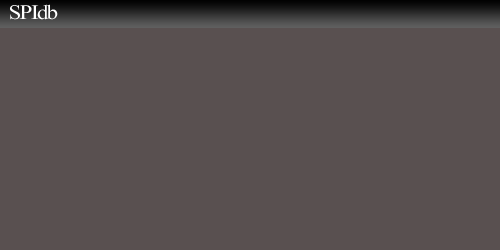
<style>
.page{position:relative;width:500px;height:250px;background:#595050}
.page>*{position:absolute;margin:0}
.t1{font:25px "ShonarBangla";letter-spacing:-0.06em;color:#ffffff;scale:1.11 1}
</style>
<div class="page">
<p class="t1" style="left:10px;top:4px;width:48px;height:16px">SPIdb</p>
</div>
